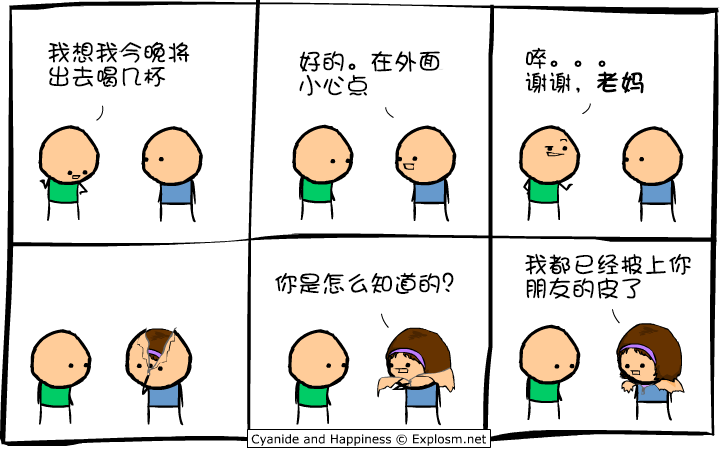
<style>
.page{position:relative;width:720px;height:450px;background:#ffffff}
.page>*{position:absolute;margin:0}
.t1{font:24px/24px "DFShaoNvW5";color:#000000}
.t2{font:24px/24px "DFShaoNvW5";color:#000000;font-weight:bold}
.t3{font:24px "DFShaoNvW5";color:#000000}
</style>
<div class="page">
<p class="t1" style="left:48px;top:41px;width:142px;height:46px">我想我今晚将<br>出去喝几杯</p>
<p class="t1" style="left:299px;top:51px;width:141px;height:45px">好的。在外面<br>小心点</p>
<p class="t1" style="left:525px;top:47px;width:119px;height:47px">啐。。。<br>谢谢，<span class="t2">老妈</span></p>
<p class="t1" style="left:525px;top:253px;width:166px;height:46px">我都已经披上你<br>朋友的皮了</p>
<p class="t3" style="left:275px;top:272px;width:179px;height:22px">你是怎么知道的？</p>
</div>
